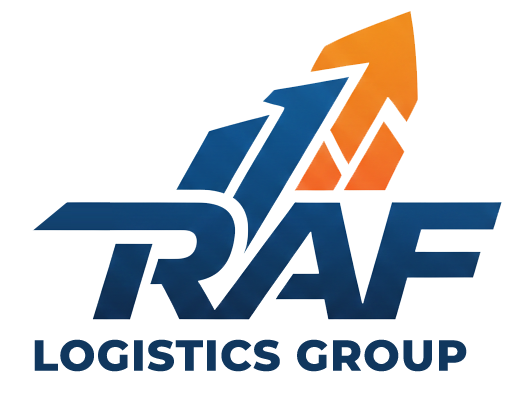
<style>
.page{position:relative;width:517px;height:394px;background:#ffffff}
.page>*{position:absolute;margin:0}
.t1{font:43px "Montserrat-ExtraBold";letter-spacing:0.03em;color:#10375e;text-transform:uppercase}
</style>
<div class="page">
<p class="t1" style="left:34px;top:339px;width:433px;height:33px">Logistics Group</p>
</div>
